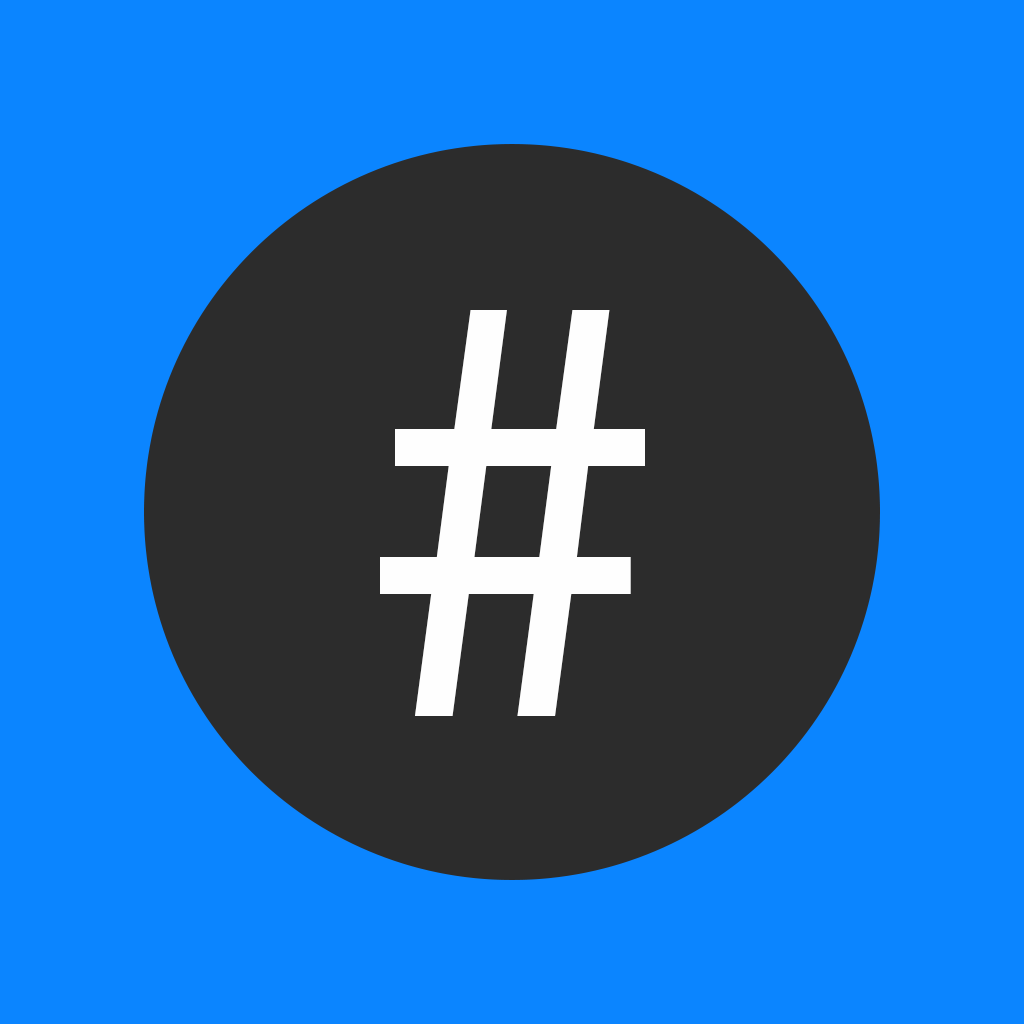
<style>
.page{position:relative;width:1024px;height:1024px;background:#0b85ff}
.page>*{position:absolute;margin:0}
.t1{font:625px "MyriadPro-Regular";color:#fefefe}
</style>
<div class="page">
<p class="t1" style="left:380px;top:310px;width:265px;height:406px">#</p>
</div>
